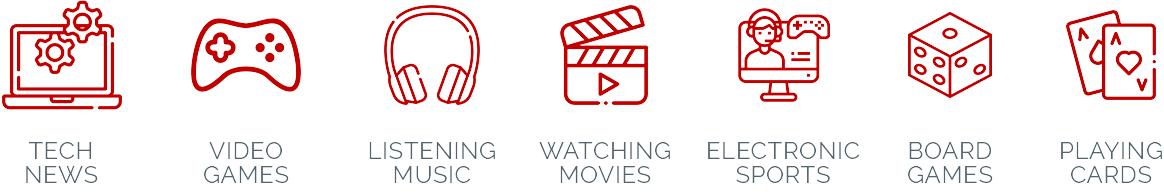
<style>
.page{position:relative;width:1164px;height:196px;background:#ffffff}
.page>*{position:absolute;margin:0}
.t1{font:24px/24px "Raleway-Regular";letter-spacing:0.025em;color:#54656e;text-transform:uppercase}
</style>
<div class="page">
<p class="t1" style="left:26px;top:141px;width:72px;height:43px;text-align:center">Tech<br>News</p>
<p class="t1" style="left:203px;top:141px;width:86px;height:43px;text-align:center">Video<br>Games</p>
<p class="t1" style="left:369px;top:141px;width:126px;height:43px;text-align:center">Listening<br>Music</p>
<p class="t1" style="left:539px;top:141px;width:131px;height:43px;text-align:center">Watching<br>movies</p>
<p class="t1" style="left:708px;top:141px;width:152px;height:43px;text-align:center">electronic<br>sports</p>
<p class="t1" style="left:907px;top:141px;width:86px;height:43px;text-align:center">board<br>games</p>
<p class="t1" style="left:1061px;top:141px;width:101px;height:43px;text-align:center">playing<br>cards</p>
</div>
